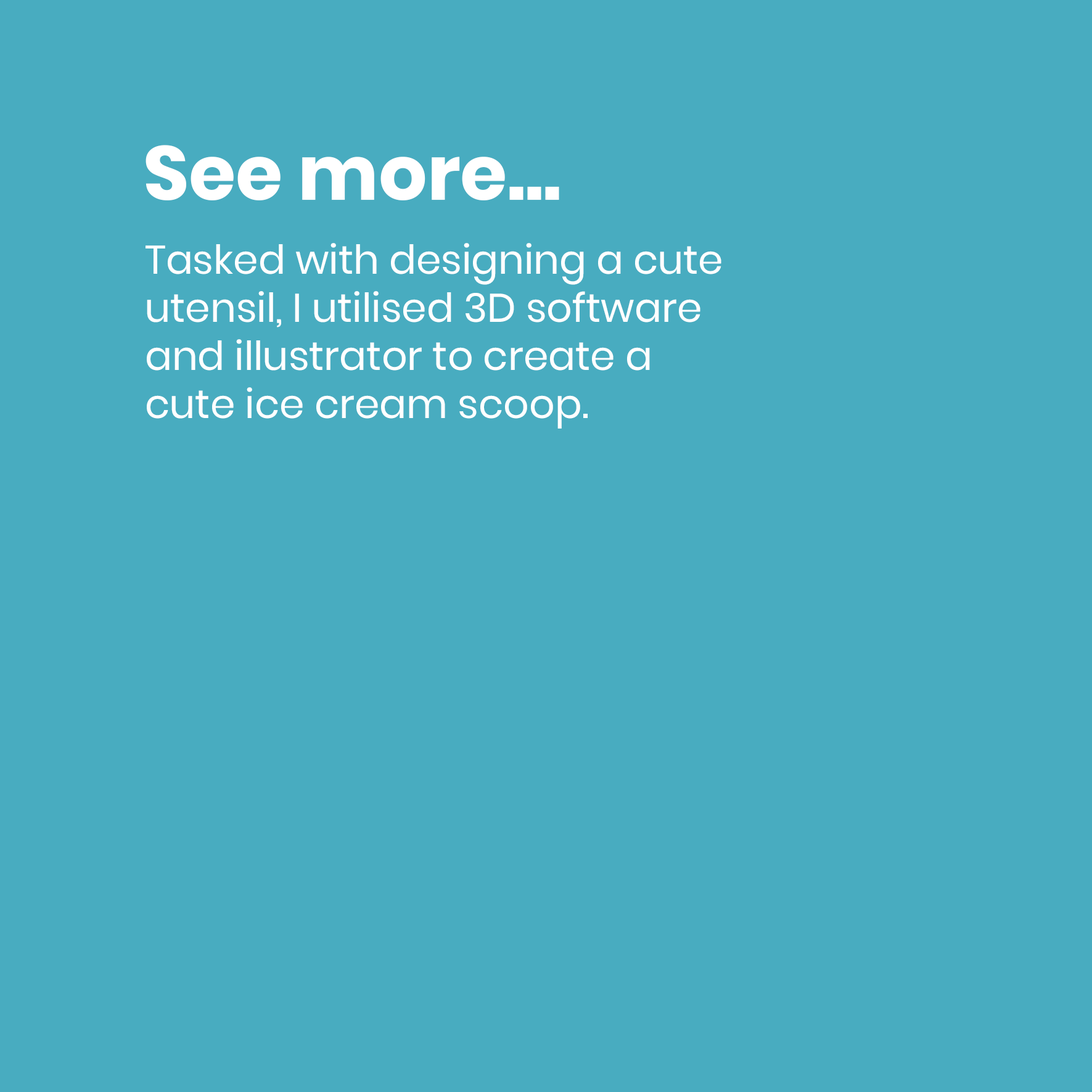
<style>
.page{position:relative;width:1092px;height:1092px;background:#48acc0}
.page>*{position:absolute;margin:0}
.t1{font:76px "Poppins-Bold";color:#ffffff}
.t2{font:40.1px "Poppins-Regular";color:#ffffff}
</style>
<div class="page">
<p class="t1" style="left:146px;top:145px;width:413px;height:55px">See more...</p>
<p class="t2" style="left:146px;top:243px;width:575px;height:186px">Tasked with designing a cute<br>utensil, I utilised 3D software<br>and illustrator to create a<br>cute ice cream scoop.</p>
</div>
